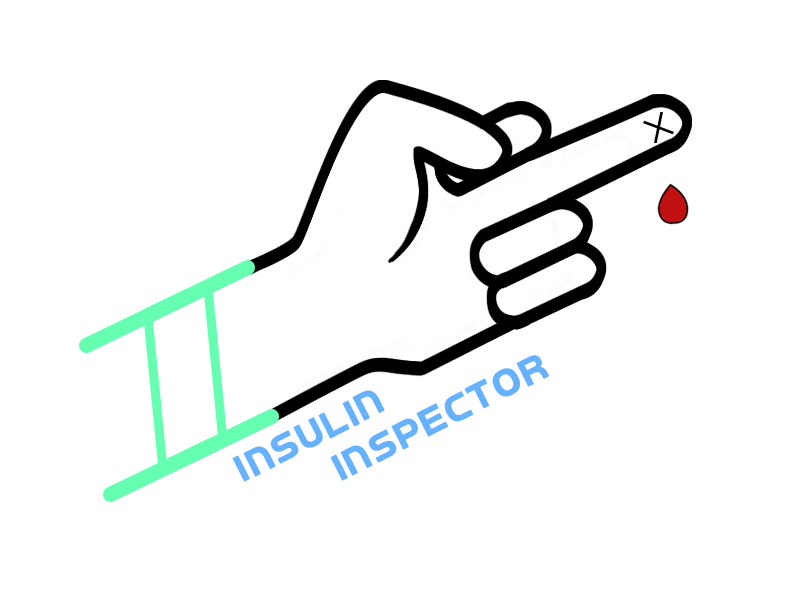
<style>
.page{position:relative;width:800px;height:600px;background:#ffffff}
.page>*{position:absolute;margin:0}
.t1{font:36px "aAutobusOmnibus";color:#66b2ff}
</style>
<div class="page">
<p class="t1" style="left:232px;top:355px;width:318px;height:127px;text-align:center;rotate:-27deg">INSULIN <br>INSPECTOR</p>
</div>
